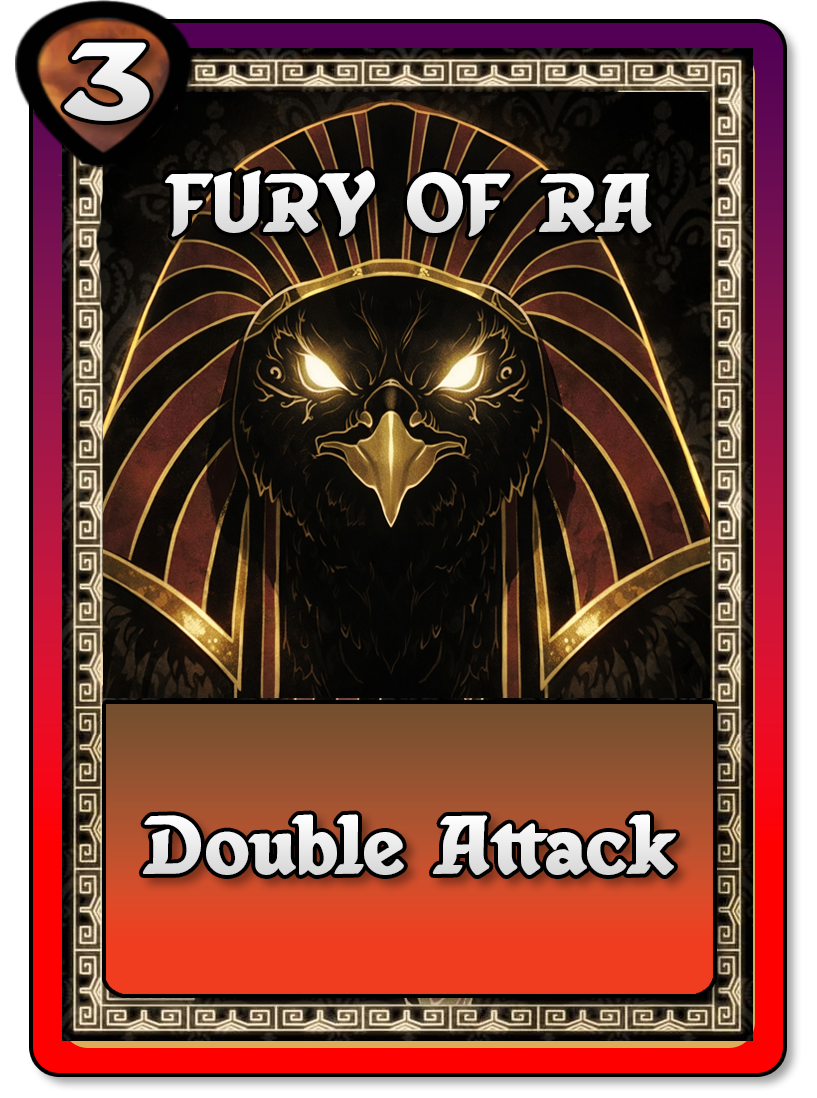
<style>
.page{position:relative;width:817px;height:1098px}
.page>*{position:absolute;margin:0}
.t1{font:108.3px "AnubisMythicalSerif";color:#eaeaea;scale:1.31 1}
.t2{font:83.3px "AnubisMythicalSerif";color:#ececec}
.t3{font:83.3px "AnubisMythicalSerif";color:#e8e8e8}
</style>
<div class="page">
<p class="t1" style="left:64px;top:42px;width:86px;height:79px">3</p>
<p class="t2" style="left:165px;top:170px;width:487px;height:67px">FURY OF RA</p>
<p class="t3" style="left:142px;top:814px;width:534px;height:61px">Double Attack</p>
</div>
